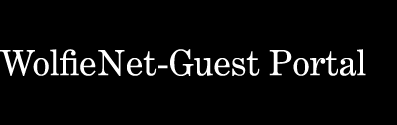
<style>
.page{position:relative;width:397px;height:125px;background:#000000}
.page>*{position:absolute;margin:0}
.t1{font:35px "CenturyExpandedLTStd";color:#ffffff}
</style>
<div class="page">
<p class="t1" style="left:0px;top:49px;width:366px;height:27px">WolfieNet-Guest Portal</p>
</div>
